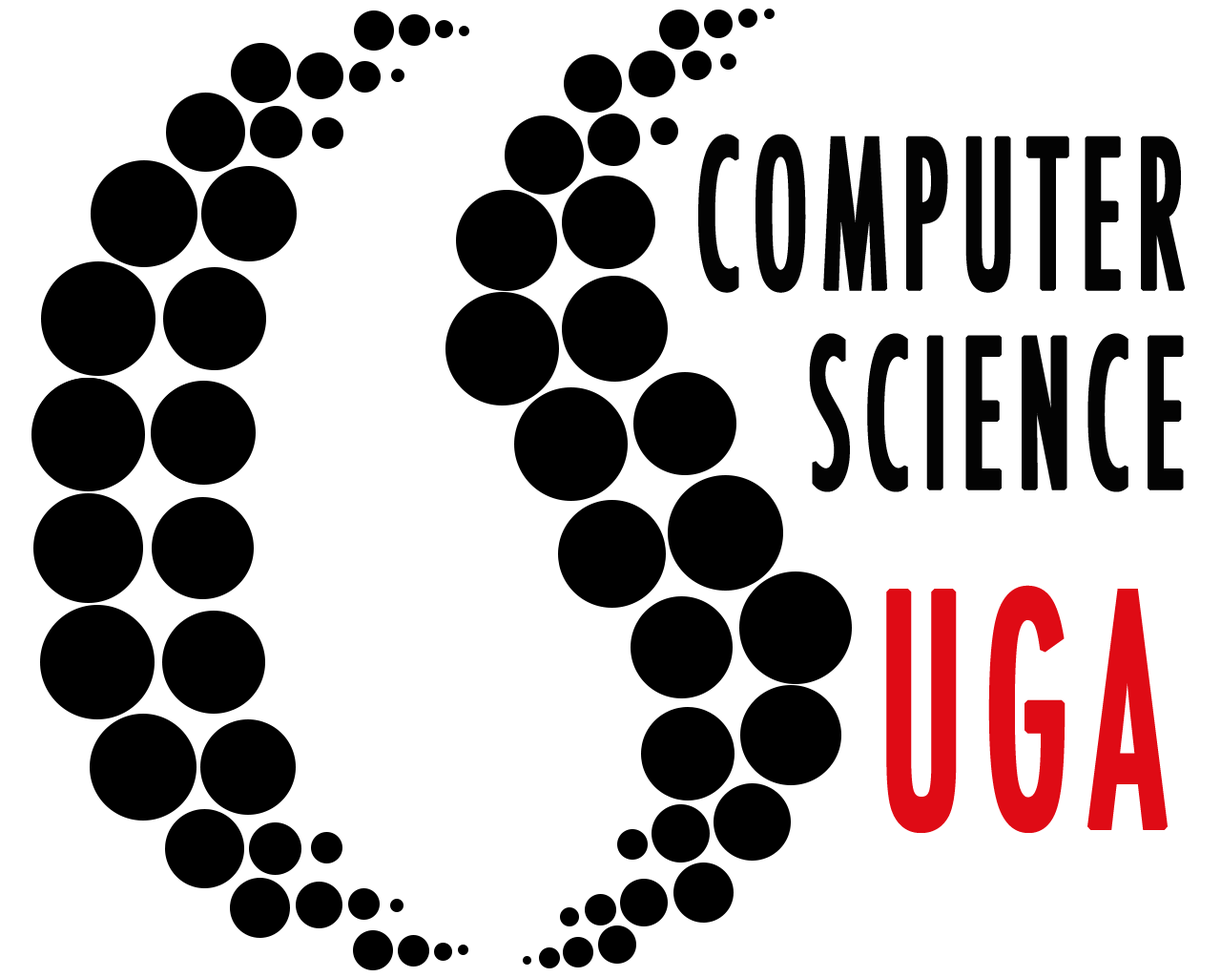
<style>
.page{position:relative;width:1221px;height:977px;background:#ffffff}
.page>*{position:absolute;margin:0}
.t1{font:199.2px "Futura-CondensedMedium";letter-spacing:0.09em;color:#030303;font-weight:bold;scale:0.58 1}
.t2{font:311.3px "Futura-CondensedMedium";letter-spacing:0.09em;color:#df0b15;font-weight:bold;scale:0.58 1}
</style>
<div class="page">
<p class="t1" style="left:698px;top:134px;width:488px;height:358px;text-align:right">COMPUTER<br> SCIENCE</p>
<p class="t2" style="left:886px;top:585px;width:281px;height:248px">UGA</p>
</div>
